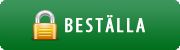
<style>
.page{position:relative;width:180px;height:50px}
.page>*{position:absolute;margin:0}
.t1{font:20.8px "MyriadPro-Cond";letter-spacing:0.09em;color:#ffffff;font-weight:bold}
</style>
<div class="page">
<p class="t1" style="left:65px;top:15px;width:80px;height:18px">BESTÄLLA</p>
</div>
